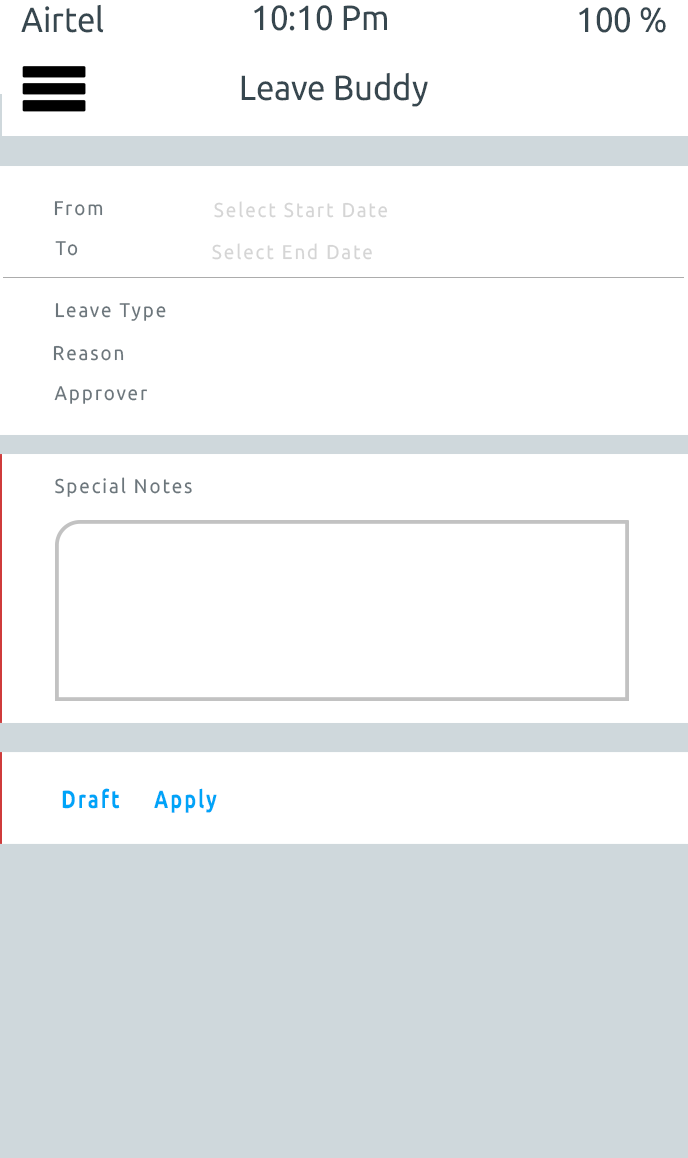
<style>
.page{position:relative;width:688px;height:1158px;background:#ffffff}
.page>*{position:absolute;margin:0}
.t1{font:35px "Ubuntu";color:#37474f;scale:0.94 1}
.t2{font:20px "Ubuntu";letter-spacing:0.1em;color:#6c767c;scale:0.94 1}
.t3{font:20px "Ubuntu";letter-spacing:0.1em;color:#d5d5d5;scale:0.94 1}
.t4{font:25px "Ubuntu-Bold";letter-spacing:0.1em;color:#00a4f8;scale:0.79 1}
</style>
<div class="page">
<p class="t1" style="left:21px;top:4px;width:83px;height:29px">Airtel</p>
<p class="t1" style="left:254px;top:5px;width:133px;height:26px">10:10 Pm</p>
<p class="t1" style="left:579px;top:7px;width:87px;height:26px">100 %</p>
<p class="t1" style="left:241px;top:72px;width:187px;height:35px">Leave Buddy</p>
<p class="t2" style="left:54px;top:201px;width:49px;height:15px">From</p>
<p class="t3" style="left:214px;top:201px;width:174px;height:17px">Select Start Date</p>
<p class="t2" style="left:55px;top:241px;width:23px;height:15px">To</p>
<p class="t3" style="left:212px;top:243px;width:160px;height:17px">Select End Date</p>
<p class="t2" style="left:55px;top:303px;width:111px;height:18px">Leave Type</p>
<p class="t2" style="left:53px;top:345px;width:71px;height:16px">Reason</p>
<p class="t2" style="left:54px;top:386px;width:93px;height:18px">Approver</p>
<p class="t2" style="left:55px;top:477px;width:137px;height:20px">Special Notes</p>
<p class="t4" style="left:62px;top:788px;width:58px;height:21px">Draft</p>
<p class="t4" style="left:154px;top:788px;width:63px;height:25px">Apply</p>
</div>
